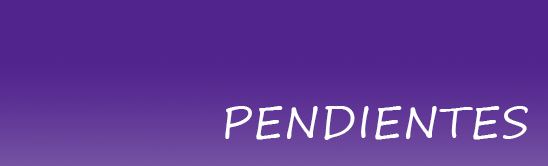
<style>
.page{position:relative;width:548px;height:166px;background:#51238d}
.page>*{position:absolute;margin:0}
.t1{font:43.8px "SegoePrint";letter-spacing:0.025em;color:#ffffff}
</style>
<div class="page">
<p class="t1" style="left:225px;top:106px;width:303px;height:34px">PENDIENTES</p>
</div>
